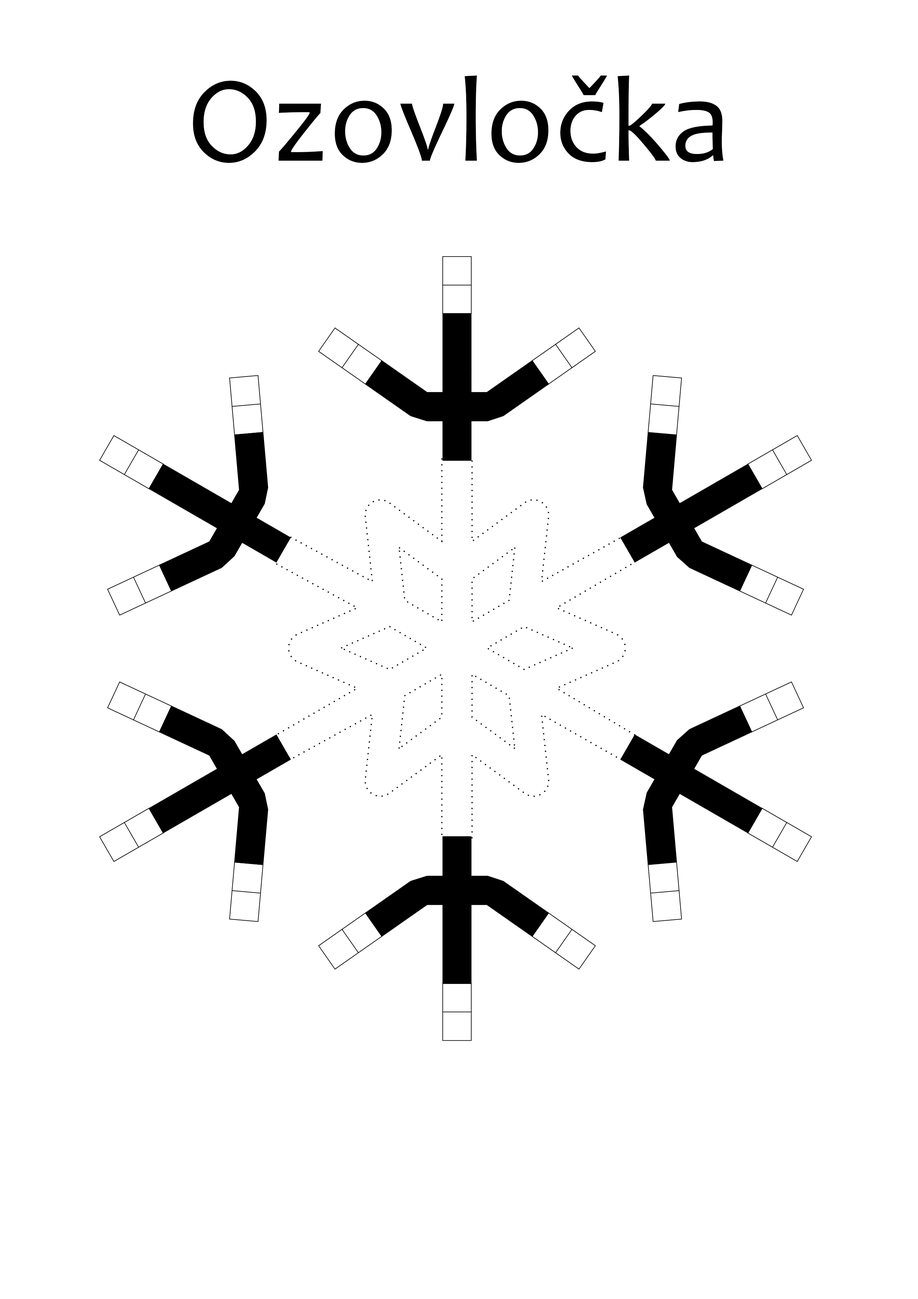
<style>
.page{position:relative;width:918px;height:1299px;background:#ffffff}
.page>*{position:absolute;margin:0}
.t1{font:123.4px "Candara";color:#000000}
</style>
<div class="page">
<p class="t1" style="left:193px;top:76px;width:530px;height:87px">Ozovločka</p>
</div>
